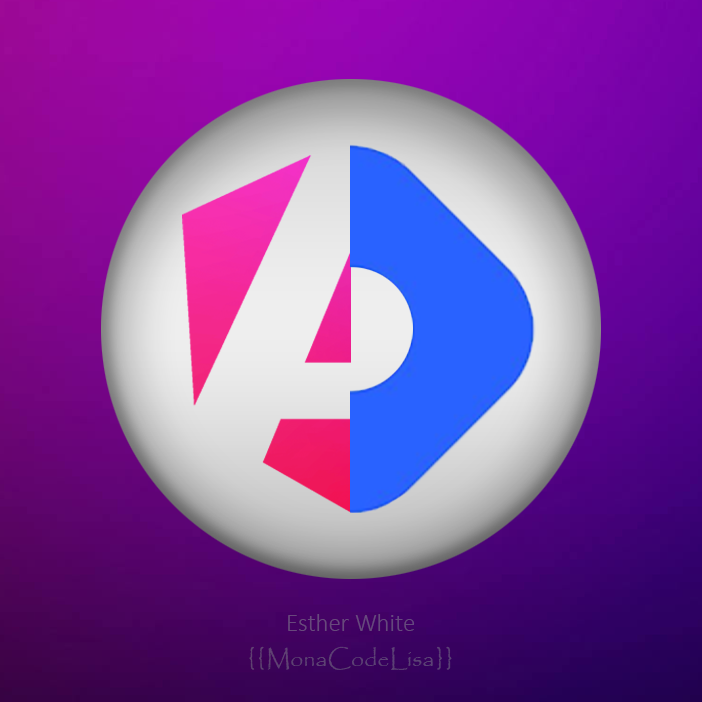
<style>
.page{position:relative;width:702px;height:702px}
.page>*{position:absolute;margin:0}
.t1{font:24.8px "Calibri-Light";color:#67487c}
.t2{font:23.5px "Papyrus-Regular";color:#5d4175}
</style>
<div class="page">
<p class="t1" style="left:288px;top:614px;width:127px;height:17px">Esther White</p>
<p class="t2" style="left:249px;top:646px;width:203px;height:24px">{{MonaCodeLisa}}</p>
</div>
